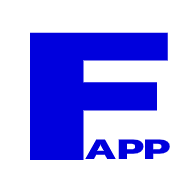
<style>
.page{position:relative;width:192px;height:192px;background:#ffffff}
.page>*{position:absolute;margin:0}
.t1{font:197.6px "Kanit-Bold";color:#0000dd;scale:1.44 1}
.t2{font:30.4px "Kanit-Bold";color:#0000dd;scale:1.44 1}
</style>
<div class="page">
<p class="t1" style="left:30px;top:32px;width:138px;height:128px">F</p>
<p class="t2" style="left:85px;top:139px;width:85px;height:20px">APP</p>
</div>
